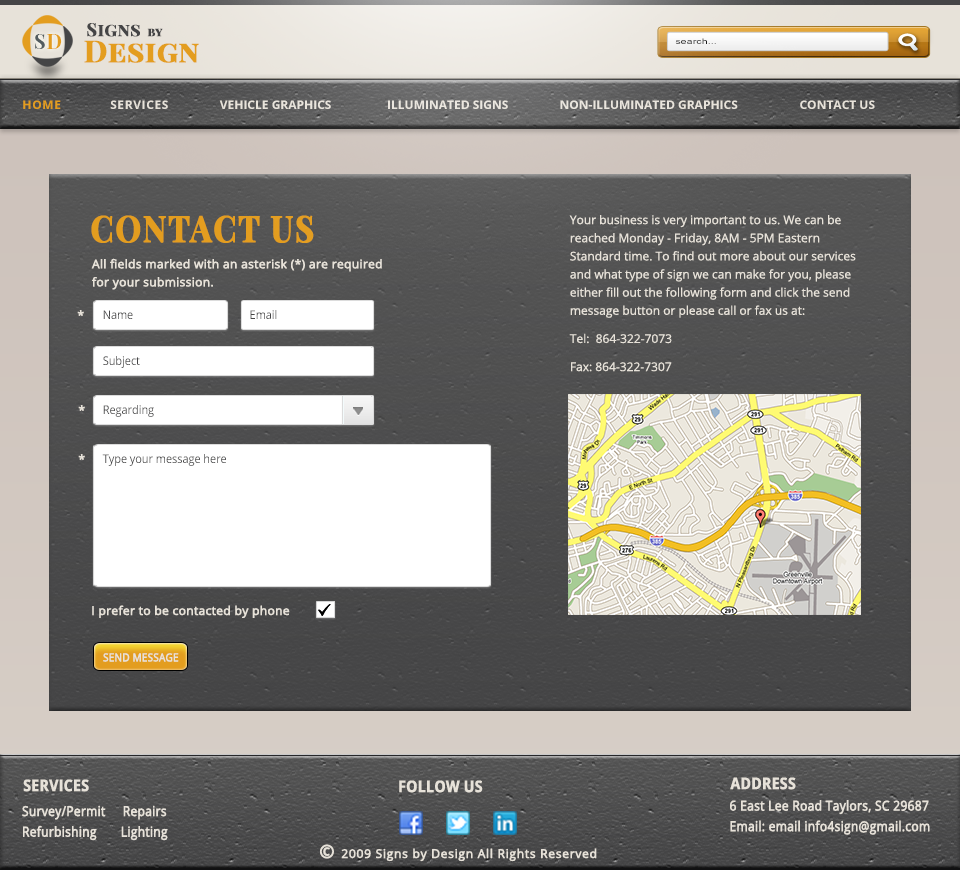
<style>
.page{position:relative;width:960px;height:870px}
.page>*{position:absolute;margin:0}
.t1{font:18px "PlayfairDisplaySC-Bold";color:#454546;font-weight:bold}
.t2{font:12px "PlayfairDisplaySC-Bold";color:#454546;font-weight:bold}
.t3{font:20px "PlayfairDisplaySC-Bold";color:#535c5f}
.t4{font:20px "PlayfairDisplaySC-Bold";color:#e39d1f}
.t5{font:30px "PlayfairDisplaySC-Bold";color:#e39d1f;font-weight:bold}
.t6{font:7.7px "ArialMT";color:#191919;scale:1.4 1}
.t7{font:12px "OpenSans-Bold";letter-spacing:0.05em;color:#e39d1f}
.t8{font:12px "OpenSans-Bold";letter-spacing:0.05em;color:#e7e2d9}
.t9{font:12px "OpenSans-Bold";color:#e7e2d9}
.t10{font:36px "PlayfairDisplaySC-Bold";letter-spacing:0.035em;color:#e39d1f;font-weight:bold;scale:0.9 1}
.t11{font:12px/18.1px "OpenSans";color:#e7e2d9}
.t12{font:12px/18px "OpenSans";color:#e7e2d9;font-weight:bold}
.t13{font:12px "OpenSans";color:#e7e2d9;font-weight:bold}
.t14{font:12px "OpenSans";color:#454546;scale:0.91 1}
.t15{font:11px "OpenSans";color:#e7e2d9;font-weight:bold;scale:0.9 1}
.t16{font:15.9px "OpenSans-Bold";color:#e7e2d9;font-weight:bold;scale:0.88 1}
.t17{font:13.6px/20.6px "OpenSans";color:#e7e2d9;font-weight:bold;scale:0.88 1}
.t18{font:12px "OpenSans";letter-spacing:0.035em;color:#e7e2d9;font-weight:bold}
.t19{font:18px "OpenSans";letter-spacing:0.035em;color:#e7e2d9;font-weight:bold}
</style>
<div class="page">
<p class="t1" style="left:87px;top:23px;width:53px;height:14px">Signs</p>
<p class="t2" style="left:147px;top:28px;width:16px;height:9px">by</p>
<p class="t3" style="left:35px;top:34px;width:10px;height:15px">S</p>
<p class="t4" style="left:47px;top:34px;width:15px;height:15px">D</p>
<p class="t5" style="left:84px;top:40px;width:115px;height:23px">Design</p>
<p class="t6" style="left:675px;top:38px;width:41px;height:6px">search...</p>
<p class="t7" style="left:23px;top:100px;width:38px;height:9px">HOME</p>
<p class="t8" style="left:110px;top:100px;width:58px;height:9px">SERVICES</p>
<p class="t9" style="left:219px;top:100px;width:112px;height:9px">VEHICLE GRAPHICS</p>
<p class="t9" style="left:388px;top:100px;width:120px;height:9px">ILLUMINATED SIGNS</p>
<p class="t9" style="left:560px;top:100px;width:178px;height:9px">NON-ILLUMINATED GRAPHICS</p>
<p class="t9" style="left:800px;top:100px;width:75px;height:9px">CONTACT US</p>
<p class="t10" style="left:91px;top:215px;width:223px;height:28px">CONTACT US</p>
<p class="t11" style="left:569px;top:215px;width:287px;height:157px">Your business is very important to us. We can be <br>reached Monday - Friday, 8AM - 5PM Eastern <br>Standard time. To find out more about our services <br>and what type of sign we can make for you, please <br>either fill out the following form and click the send <br>message button or please call or fax us at:<br>Tel:  864-322-7073<br>Fax: 864-322-7307</p>
<p class="t12" style="left:91px;top:258px;width:291px;height:32px">All fields marked with an asterisk (*) are required <br>for your submission.</p>
<p class="t13" style="left:77px;top:310px;width:7px;height:6px">*</p>
<p class="t14" style="left:103px;top:310px;width:30px;height:9px">Name</p>
<p class="t14" style="left:250px;top:310px;width:27px;height:9px">Email</p>
<p class="t14" style="left:103px;top:356px;width:37px;height:12px">Subject</p>
<p class="t13" style="left:78px;top:405px;width:7px;height:6px">*</p>
<p class="t14" style="left:103px;top:405px;width:51px;height:12px">Regarding</p>
<p class="t13" style="left:78px;top:454px;width:7px;height:6px">*</p>
<p class="t14" style="left:102px;top:454px;width:124px;height:12px">Type your message here</p>
<p class="t13" style="left:92px;top:605px;width:198px;height:13px">I prefer to be contacted by phone</p>
<p class="t15" style="left:103px;top:653px;width:76px;height:9px">SEND MESSAGE</p>
<p class="t16" style="left:23px;top:779px;width:66px;height:13px">SERVICES</p>
<p class="t16" style="left:399px;top:780px;width:84px;height:13px">FOLLOW US</p>
<p class="t16" style="left:730px;top:777px;width:66px;height:13px">ADDRESS</p>
<p class="t17" style="left:22px;top:805px;width:146px;height:36px">Survey/Permit     Repairs      <br>Refurbishing       Lighting</p>
<p class="t17" style="left:730px;top:800px;width:200px;height:35px">6 East Lee Road Taylors, SC 29687<br>Email: email info4sign@gmail.com</p>
<p class="t18" style="left:320px;top:844px;width:277px;height:18px"><span class="t19">© </span>2009 Signs by Design All Rights Reserved</p>
</div>
